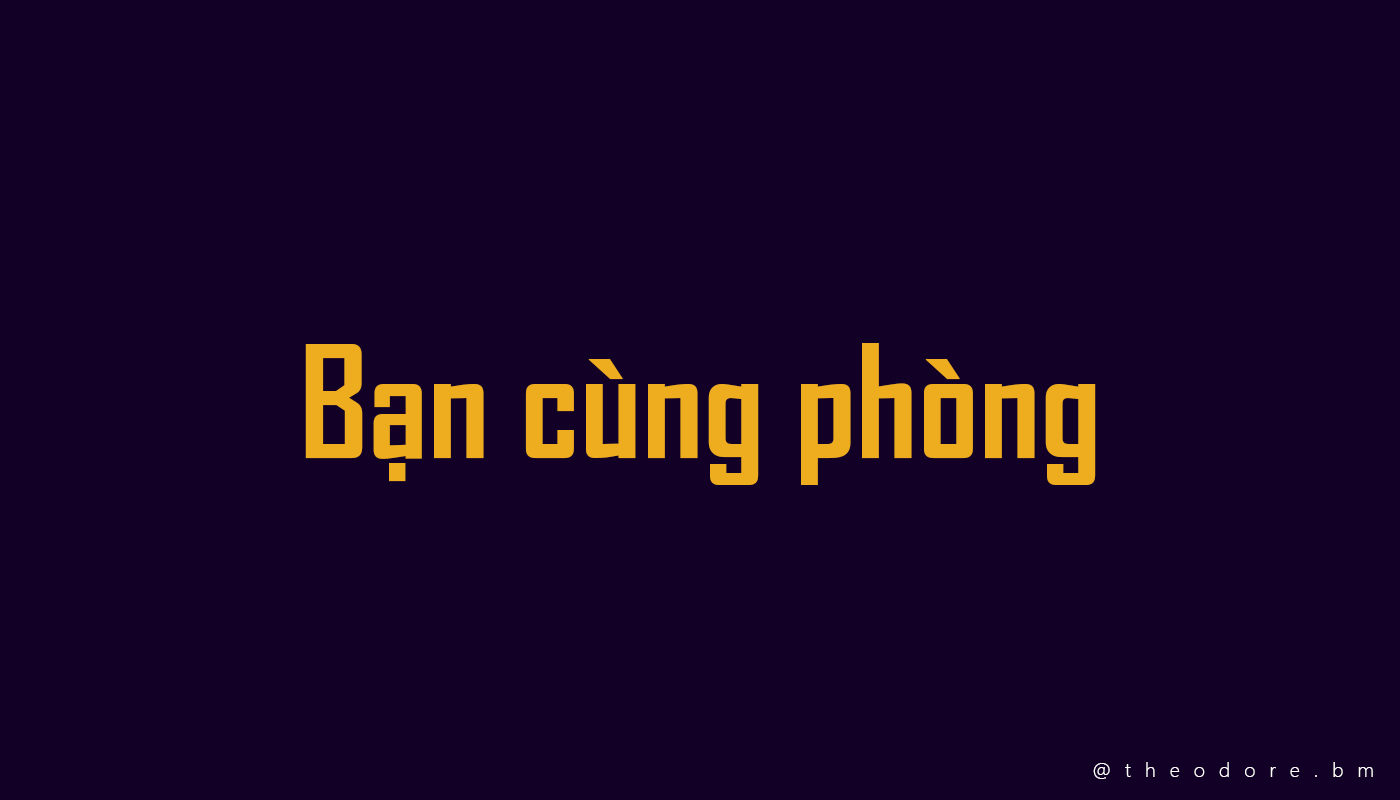
<style>
.page{position:relative;width:1400px;height:800px;background:#120026}
.page>*{position:absolute;margin:0}
.t1{font:150px "SVN-AgencyFBbold";color:#eead1f}
.t2{font:20px "SegoeUI-Light";letter-spacing:0.7em;color:#ffffff}
</style>
<div class="page">
<p class="t1" style="left:305px;top:343px;width:791px;height:142px">Bạn cùng phòng</p>
<p class="t2" style="left:1093px;top:762px;width:280px;height:17px">@theodore.bm</p>
</div>
